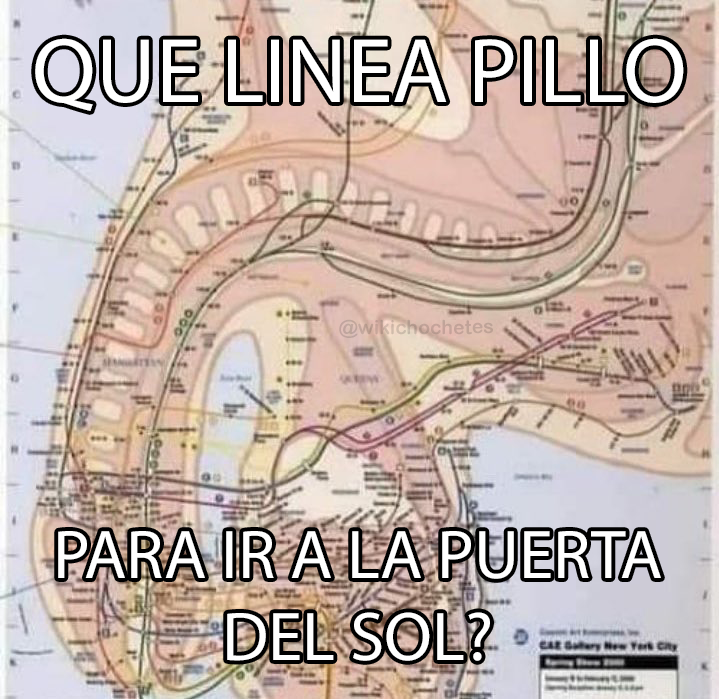
<style>
.page{position:relative;width:719px;height:699px}
.page>*{position:absolute;margin:0}
.t1{font:92.3px "MyriadPro-Regular";color:#ffffff}
.t2{font:19.6px "ArialRoundedMTBold";color:#c1a499}
.t3{font:69.4px "MyriadPro-Regular";color:#ffffff}
</style>
<div class="page">
<p class="t1" style="left:35px;top:38px;width:649px;height:73px">QUE LINEA PILLO</p>
<p class="t2" style="left:339px;top:319px;width:154px;height:19px">@wikichochetes</p>
<p class="t3" style="left:58px;top:531px;width:603px;height:130px;text-align:center">PARA IR A LA PUERTA<br>DEL SOL?</p>
</div>
